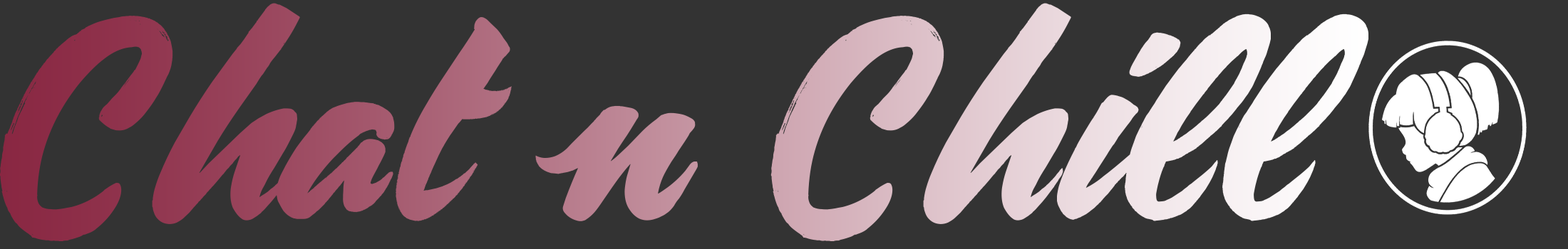
<style>
.page{position:relative;width:1568px;height:249px;background:#333333}
.page>*{position:absolute;margin:0}
.t1{font:271.4px "Carosello-Regular"}
</style>
<div class="page">
<p class="t1" style="left:0px;top:3px;width:1368px;height:239px">Chat n Chill</p>
</div>
